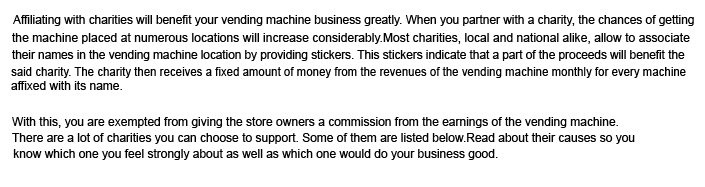
<style>
.page{position:relative;width:705px;height:187px;background:#ffffff}
.page>*{position:absolute;margin:0}
.t1{font:12px "ArialMT";color:#000000}
.t2{font:12px "ArialMT";color:#000000;scale:0.96 1}
</style>
<div class="page">
<p class="t1" style="left:13px;top:15px;width:681px;height:11px">Affiliating with charities will benefit your vending machine business greatly. When you partner with a charity, the chances of getting</p>
<p class="t1" style="left:12px;top:33px;width:678px;height:11px">the machine placed at numerous locations will increase considerably.Most charities, local and national alike, allow to associate</p>
<p class="t1" style="left:12px;top:50px;width:673px;height:11px">their names in the vending machine location by providing stickers. This stickers indicate that a part of the proceeds will benefit the</p>
<p class="t2" style="left:11px;top:67px;width:675px;height:11px">said charity. The charity then receives a fixed amount of money from the revenues of the vending machine monthly for every machine</p>
<p class="t1" style="left:11px;top:81px;width:111px;height:9px">affixed with its name.</p>
<p class="t1" style="left:12px;top:117px;width:606px;height:11px">With this, you are exempted from giving the store owners a commission from the earnings of the vending machine.</p>
<p class="t1" style="left:12px;top:133px;width:623px;height:11px">There are a lot of charities you can choose to support. Some of them are listed below.Read about their causes so you</p>
<p class="t1" style="left:13px;top:149px;width:485px;height:11px">know which one you feel strongly about as well as which one would do your business good.</p>
</div>
